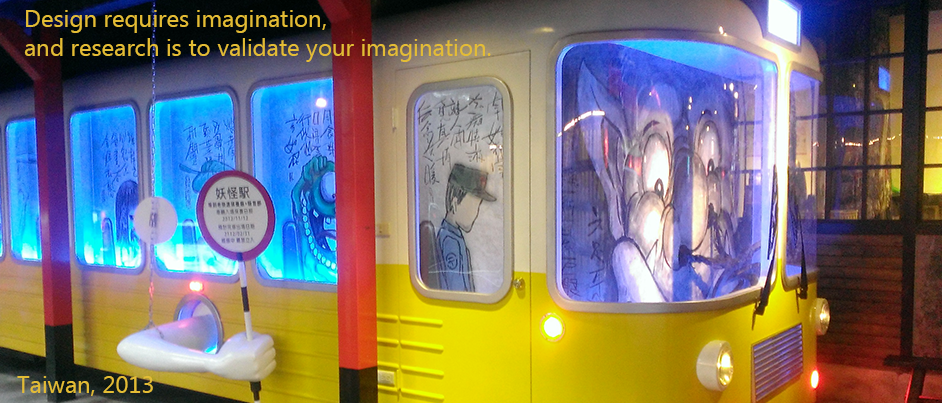
<style>
.page{position:relative;width:942px;height:403px}
.page>*{position:absolute;margin:0}
.t1{font:24px "MicrosoftTaiLe";color:#e3bc35}
</style>
<div class="page">
<p class="t1" style="left:24px;top:10px;width:467px;height:52px">Design requires imagination, <br>and research is to validate your imagination.</p>
<p class="t1" style="left:17px;top:376px;width:136px;height:20px">Taiwan, 2013</p>
</div>
